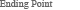
<style>
.page{position:relative;width:80px;height:10px;background:#ffffff}
.page>*{position:absolute;margin:0}
.t1{font:10px "TimesNewRomanPSMT";color:#646464}
</style>
<div class="page">
<p class="t1" style="left:0px;top:0px;width:53px;height:9px">Ending Point</p>
</div>
